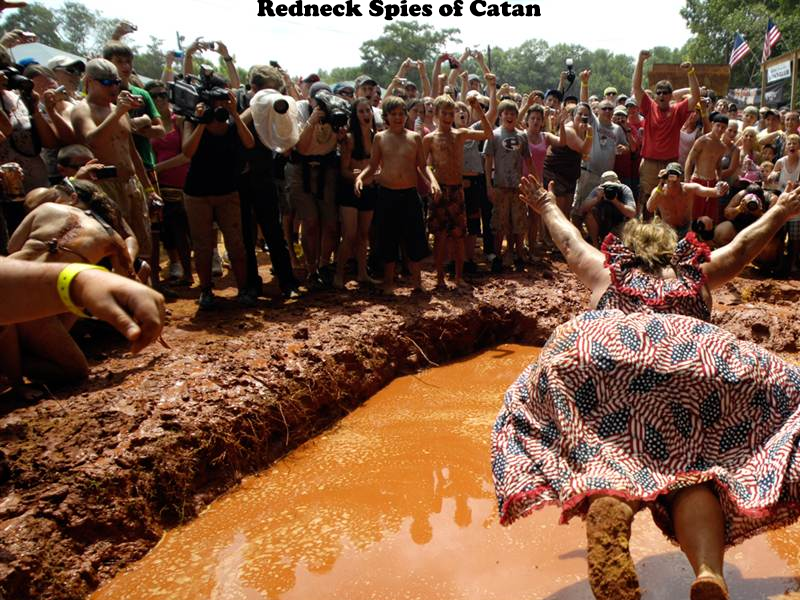
<style>
.page{position:relative;width:800px;height:600px}
.page>*{position:absolute;margin:0}
.t1{font:24px "CooperBlack";color:#000000}
</style>
<div class="page">
<p class="t1" style="left:257px;top:0px;width:284px;height:21px">Redneck Spies of Catan</p>
</div>
